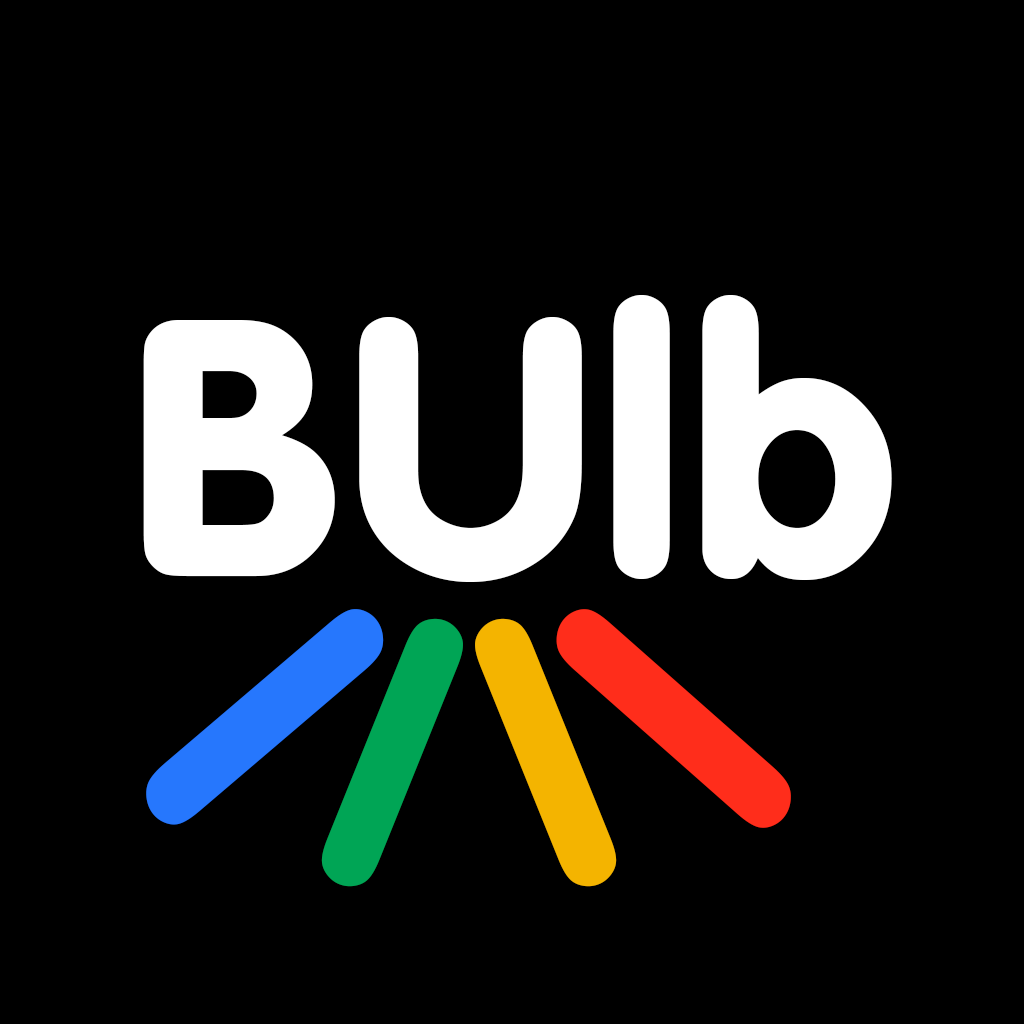
<style>
.page{position:relative;width:1024px;height:1024px;background:#000000}
.page>*{position:absolute;margin:0}
.t1{font:383.3px "VAGRundschriftD";color:#ffffff}
.t2{font:399.6px "VAGRundschriftD";color:#2677fd}
.t3{font:399.6px "VAGRundschriftD";color:#ff2d1b}
.t4{font:383.3px "VAGRundschriftD";color:#00a555}
.t5{font:383.3px "VAGRundschriftD";color:#f4b400}
</style>
<div class="page">
<p class="t1" style="left:143px;top:295px;width:749px;height:287px">BUlb</p>
<p class="t2" style="left:146px;top:609px;width:238px;height:216px;rotate:54deg">l</p>
<p class="t3" style="left:556px;top:609px;width:235px;height:219px;rotate:127deg">l</p>
<p class="t4" style="left:321px;top:618px;width:142px;height:269px;rotate:22deg">l</p>
<p class="t5" style="left:475px;top:618px;width:142px;height:269px;rotate:158deg">l</p>
</div>
